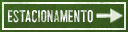
<style>
.page{position:relative;width:128px;height:32px}
.page>*{position:absolute;margin:0}
.t1{font:16px "HillstownCondensedClean";letter-spacing:0.03em;text-transform:uppercase}
</style>
<div class="page">
<p class="t1" style="left:8px;top:10px;width:85px;height:13px">ESTACIONAMENTO</p>
</div>
